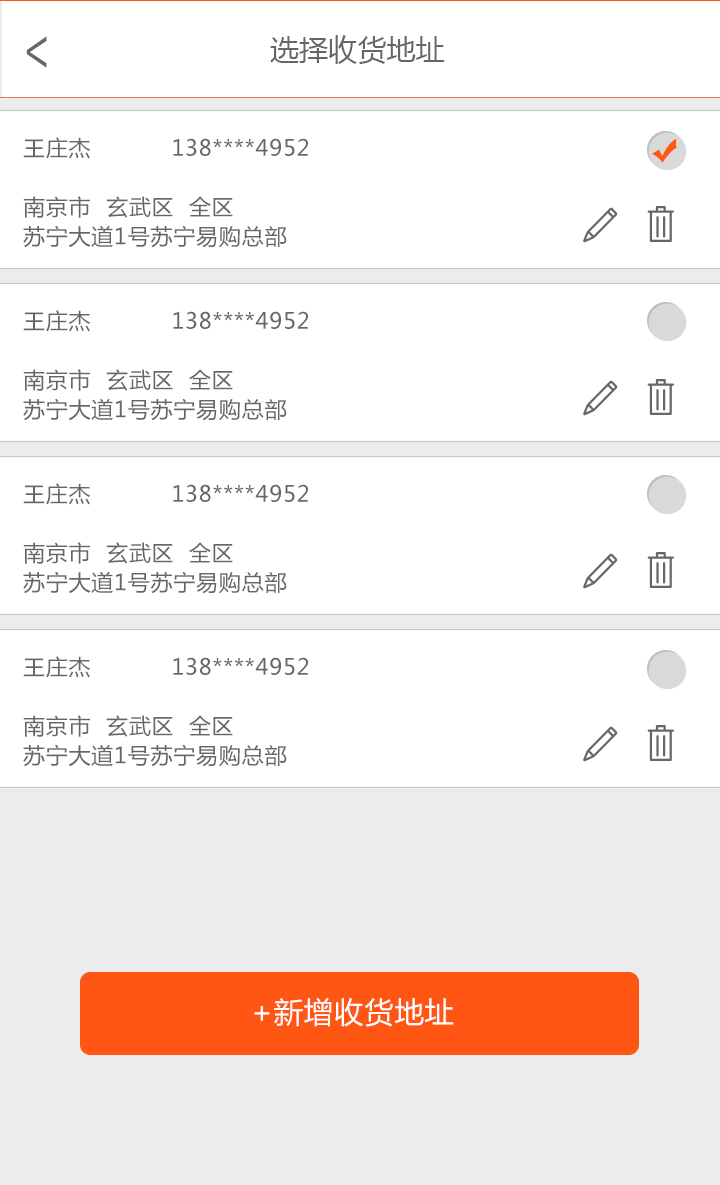
<style>
.page{position:relative;width:720px;height:1185px;background:#ffffff}
.page>*{position:absolute;margin:0}
.t1{font:51.9px "AdobeHeitiStd-Regular";color:#666666;scale:0.72 1}
.t2{font:29.2px "MicrosoftYaHei";color:#666666}
.t3{font:22px/29.5px "MicrosoftYaHei";letter-spacing:0.035em;color:#666666}
.t4{font:29.2px "MicrosoftYaHei";letter-spacing:0.035em;color:#fffefe}
</style>
<div class="page">
<p class="t1" style="left:26px;top:36px;width:21px;height:32px;rotate:180deg">&gt;</p>
<p class="t2" style="left:270px;top:35px;width:175px;height:29px">选择收货地址</p>
<p class="t3" style="left:23px;top:137px;width:285px;height:111px">王庄杰           138****4952<br><br>南京市  玄武区  全区<br>苏宁大道1号苏宁易购总部<br><br> <br><br>苏宁大道1号苏宁易购总部</p>
<p class="t3" style="left:23px;top:310px;width:285px;height:111px">王庄杰           138****4952<br><br>南京市  玄武区  全区<br>苏宁大道1号苏宁易购总部<br><br> <br><br>苏宁大道1号苏宁易购总部</p>
<p class="t3" style="left:23px;top:483px;width:285px;height:111px">王庄杰           138****4952<br><br>南京市  玄武区  全区<br>苏宁大道1号苏宁易购总部<br><br> <br><br>苏宁大道1号苏宁易购总部</p>
<p class="t3" style="left:23px;top:656px;width:285px;height:111px">王庄杰           138****4952<br><br>南京市  玄武区  全区<br>苏宁大道1号苏宁易购总部<br><br> <br><br>苏宁大道1号苏宁易购总部</p>
<p class="t4" style="left:254px;top:997px;width:200px;height:30px">+新增收货地址</p>
</div>
